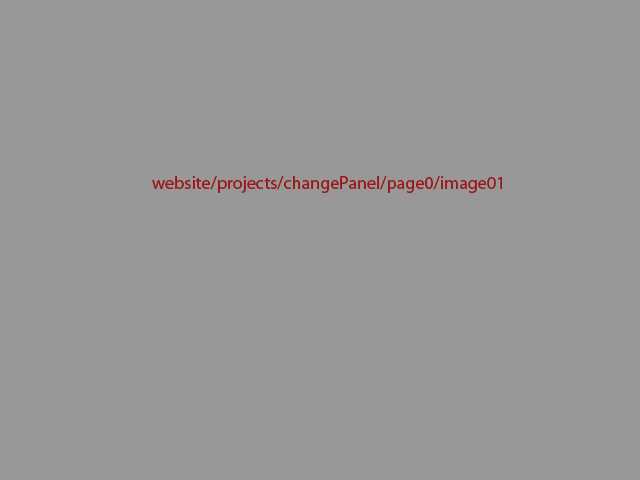
<style>
.page{position:relative;width:640px;height:480px;background:#989898}
.page>*{position:absolute;margin:0}
.t1{font:18px "MyriadPro-Regular";color:#9d1616}
</style>
<div class="page">
<p class="t1" style="left:152px;top:176px;width:350px;height:17px">website/projects/changePanel/page0/image01</p>
</div>
